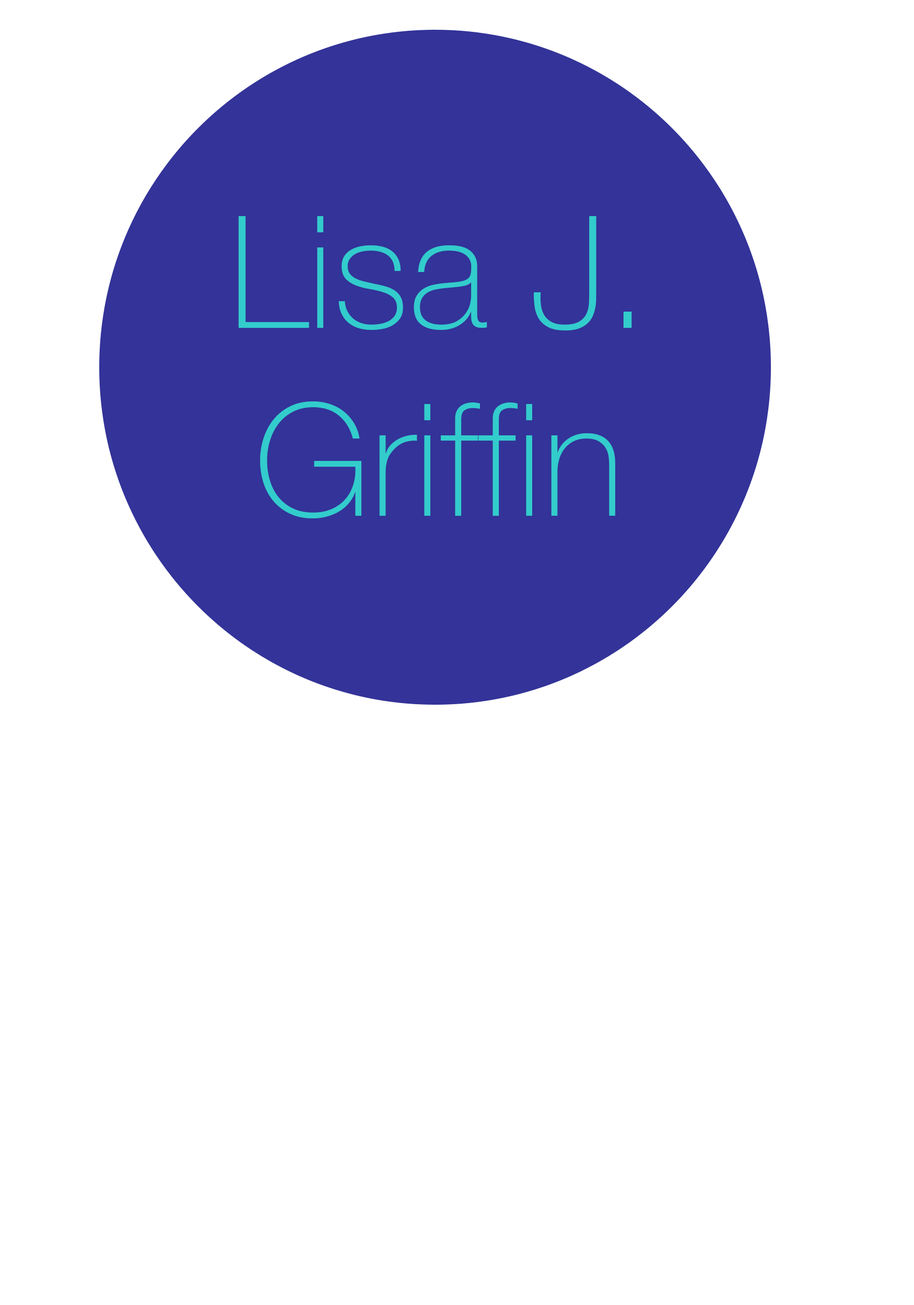
<style>
.page{position:relative;width:914px;height:1305px;background:#ffffff}
.page>*{position:absolute;margin:0}
.t1{font:156.6px "HelveticaNeue-Thin";color:#33cccc}
</style>
<div class="page">
<p class="t1" style="left:238px;top:216px;width:394px;height:302px;text-align:center">Lisa J.<br>Griffin</p>
</div>
